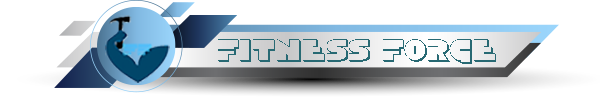
<style>
.page{position:relative;width:600px;height:97px;background:#ffffff}
.page>*{position:absolute;margin:0}
.t1{font:33.7px "DiscoDuck3D";color:#276973}
</style>
<div class="page">
<p class="t1" style="left:218px;top:39px;width:278px;height:25px">Fitness Forge</p>
</div>
